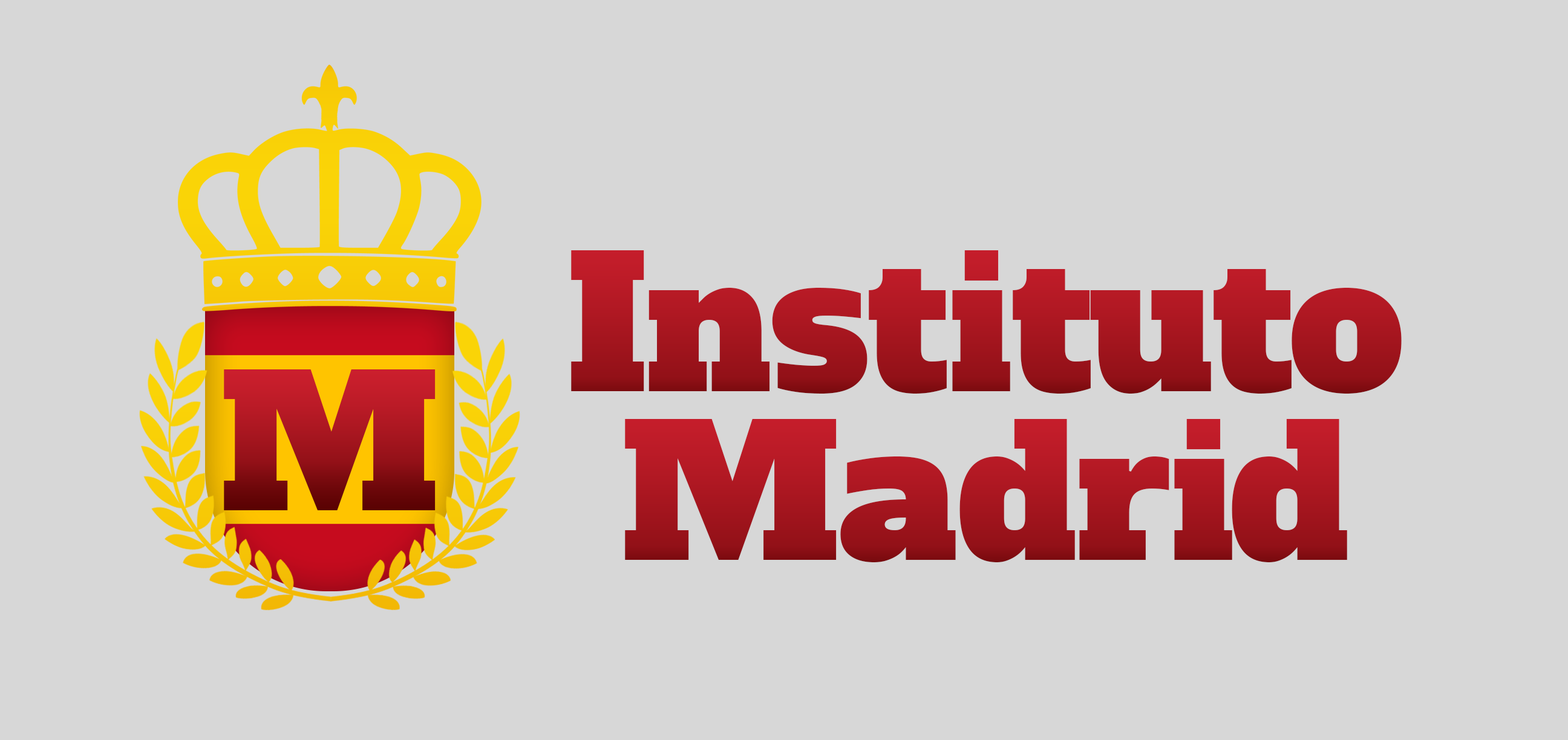
<style>
.page{position:relative;width:1568px;height:740px;background:#d7d7d7}
.page>*{position:absolute;margin:0}
.t1{font:181.5px "AlfaSlabOne-Regular";color:#a6151f}
.t2{font:181.5px "AlfaSlabOne-Regular"}
.t3{font:181.5px "AlfaSlabOne-Regular";color:#a81620}
</style>
<div class="page">
<p class="t1" style="left:571px;top:250px;width:831px;height:144px">Instituto</p>
<p class="t2" style="left:224px;top:370px;width:212px;height:141px">M</p>
<p class="t3" style="left:625px;top:419px;width:722px;height:144px">Madrid</p>
</div>
